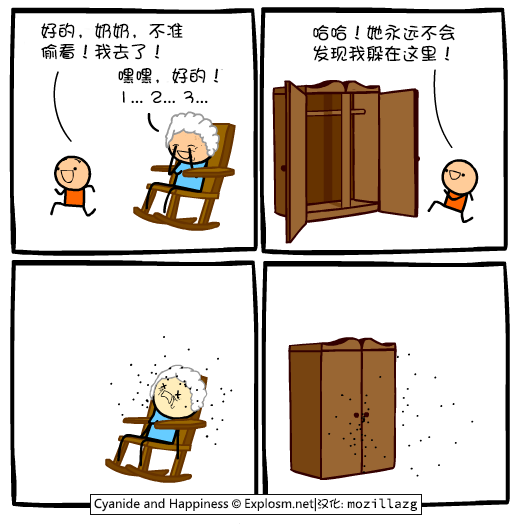
<style>
.page{position:relative;width:530px;height:530px;background:#ffffff}
.page>*{position:absolute;margin:0}
.t1{font:18px/21px "DFPShaoNvW5";color:#000000}
</style>
<div class="page">
<p class="t1" style="left:41px;top:22px;width:142px;height:38px">好的，奶奶，不准<br>偷看！我去了！</p>
<p class="t1" style="left:313px;top:24px;width:142px;height:38px">哈哈！她永远不会<br>发现我躲在这里！</p>
<p class="t1" style="left:118px;top:67px;width:101px;height:36px">嘿嘿，好的！<br>1... 2... 3...</p>
</div>
